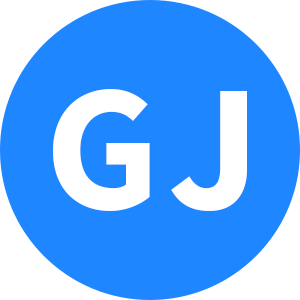
<style>
.page{position:relative;width:300px;height:300px;background:#1e86ff}
.page>*{position:absolute;margin:0}
.t1{font:180px "SourceSansPro-Bold";letter-spacing:0.05em;color:#ffffff}
</style>
<div class="page">
<p class="t1" style="left:53px;top:89px;width:194px;height:122px">GJ</p>
</div>
